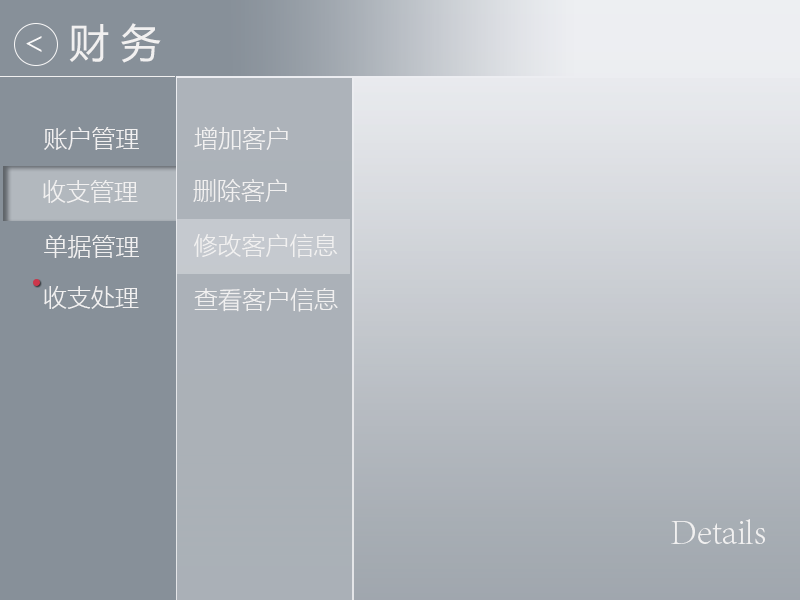
<style>
.page{position:relative;width:800px;height:600px}
.page>*{position:absolute;margin:0}
.t1{font:39.9px "MicrosoftYaHei";color:#f1f0f0}
.t2{font:24px "MicrosoftYaHeiLight";color:#f1f0f0}
.t3{font:36px "AdobeSongStd-Light";color:#f1f0f0}
</style>
<div class="page">
<p class="t1" style="left:69px;top:23px;width:92px;height:40px">财 务</p>
<p class="t2" style="left:44px;top:127px;width:95px;height:23px">账户管理</p>
<p class="t2" style="left:194px;top:127px;width:94px;height:23px">增加客户</p>
<p class="t2" style="left:43px;top:180px;width:95px;height:23px">收支管理</p>
<p class="t2" style="left:193px;top:179px;width:94px;height:23px">删除客户</p>
<p class="t2" style="left:44px;top:235px;width:95px;height:24px">单据管理</p>
<p class="t2" style="left:194px;top:234px;width:144px;height:24px">修改客户信息</p>
<p class="t2" style="left:44px;top:286px;width:95px;height:23px">收支处理</p>
<p class="t2" style="left:194px;top:288px;width:144px;height:24px">查看客户信息</p>
<p class="t3" style="left:671px;top:519px;width:94px;height:25px">Details</p>
</div>
